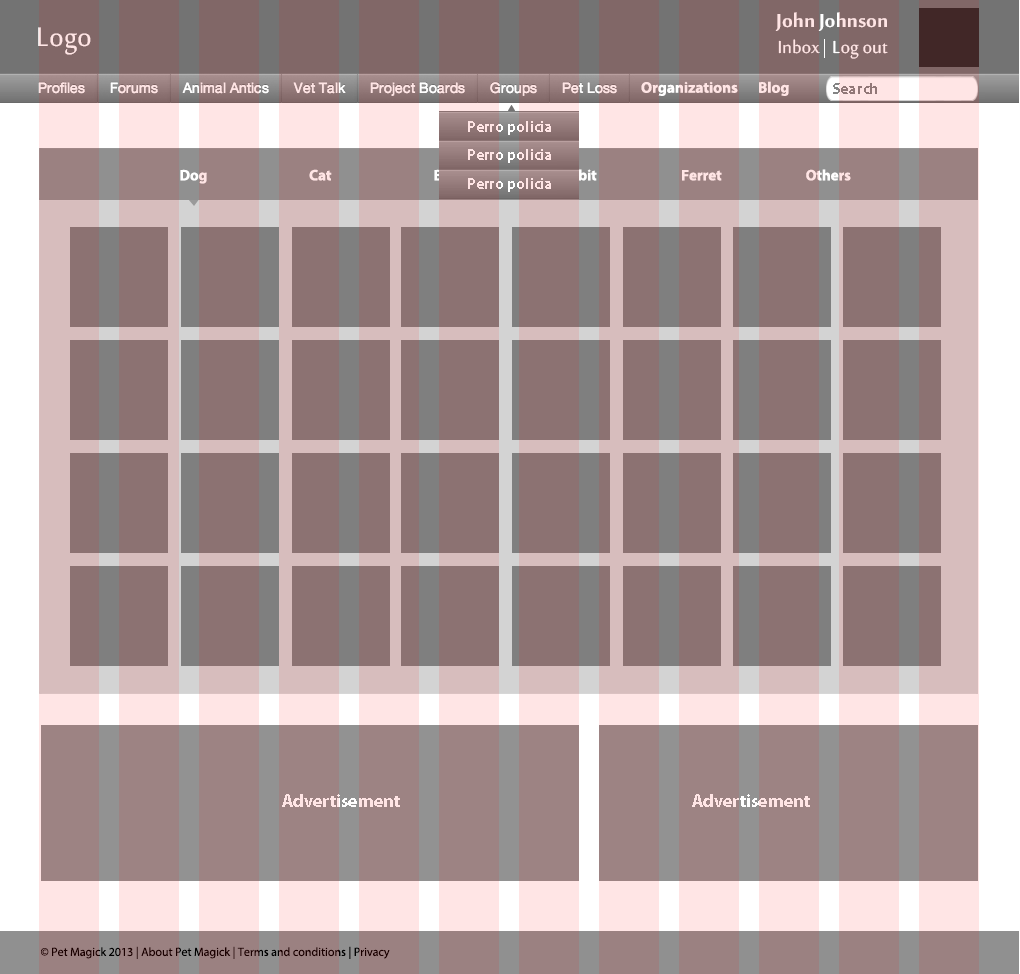
<style>
.page{position:relative;width:1020px;height:974px;background:#8c7272}
.page>*{position:absolute;margin:0}
.t1{font:25.9px "SakkalMajallaBold";color:#ffe5e5}
.t2{font:36.8px "SakkalMajalla";color:#ffe5e5}
.t3{font:24.1px "SakkalMajalla";color:#ffe5e5}
.t4{font:15.4px "MyriadPro-Bold";color:#ffe5e5}
.t5{font:15.4px "MyriadPro-Bold";color:#8b7d7d}
.t6{font:15.2px "MyriadPro-Bold";color:#ffffff}
.t7{font:15.2px "MyriadPro-Bold";color:#ffe5e5}
.t8{font:15.2px "MyriadPro-Bold";color:#a38989}
.t9{font:15.2px "MyriadPro-Bold"}
.t10{font:18px "MyriadPro-Bold";color:#ffe5e5}
.t11{font:12px "MyriadPro-Regular";color:#1a0000}
</style>
<div class="page">
<p class="t1" style="left:775px;top:12px;width:112px;height:19px">John Johnson</p>
<p class="t2" style="left:38px;top:27px;width:53px;height:28px">Logo</p>
<p class="t3" style="left:778px;top:39px;width:42px;height:15px">Inbox</p>
<p class="t3" style="left:833px;top:40px;width:55px;height:19px">Log out</p>
<p class="t4" style="left:641px;top:81px;width:97px;height:15px">Organizations</p>
<p class="t4" style="left:759px;top:81px;width:30px;height:15px">Blog</p>
<p class="t5" style="left:833px;top:83px;width:44px;height:11px">Search</p>
<p class="t4" style="left:468px;top:121px;width:83px;height:14px">Perro policia</p>
<p class="t4" style="left:468px;top:149px;width:83px;height:14px">Perro policia</p>
<p class="t6" style="left:180px;top:169px;width:27px;height:15px">Dog</p>
<p class="t7" style="left:309px;top:169px;width:23px;height:12px">Cat</p>
<p class="t8" style="left:434px;top:169px;width:27px;height:12px">Bird</p>
<p class="t9" style="left:553px;top:169px;width:44px;height:12px">Rabbit</p>
<p class="t7" style="left:682px;top:170px;width:40px;height:11px">Ferret</p>
<p class="t9" style="left:806px;top:169px;width:45px;height:12px">Others</p>
<p class="t4" style="left:468px;top:178px;width:83px;height:14px">Perro policia</p>
<p class="t10" style="left:282px;top:794px;width:118px;height:13px">Advertisement</p>
<p class="t10" style="left:692px;top:794px;width:118px;height:13px">Advertisement</p>
<p class="t11" style="left:41px;top:946px;width:349px;height:13px">© Pet Magick 2013 | About Pet Magick | Terms and conditions | Privacy</p>
</div>
